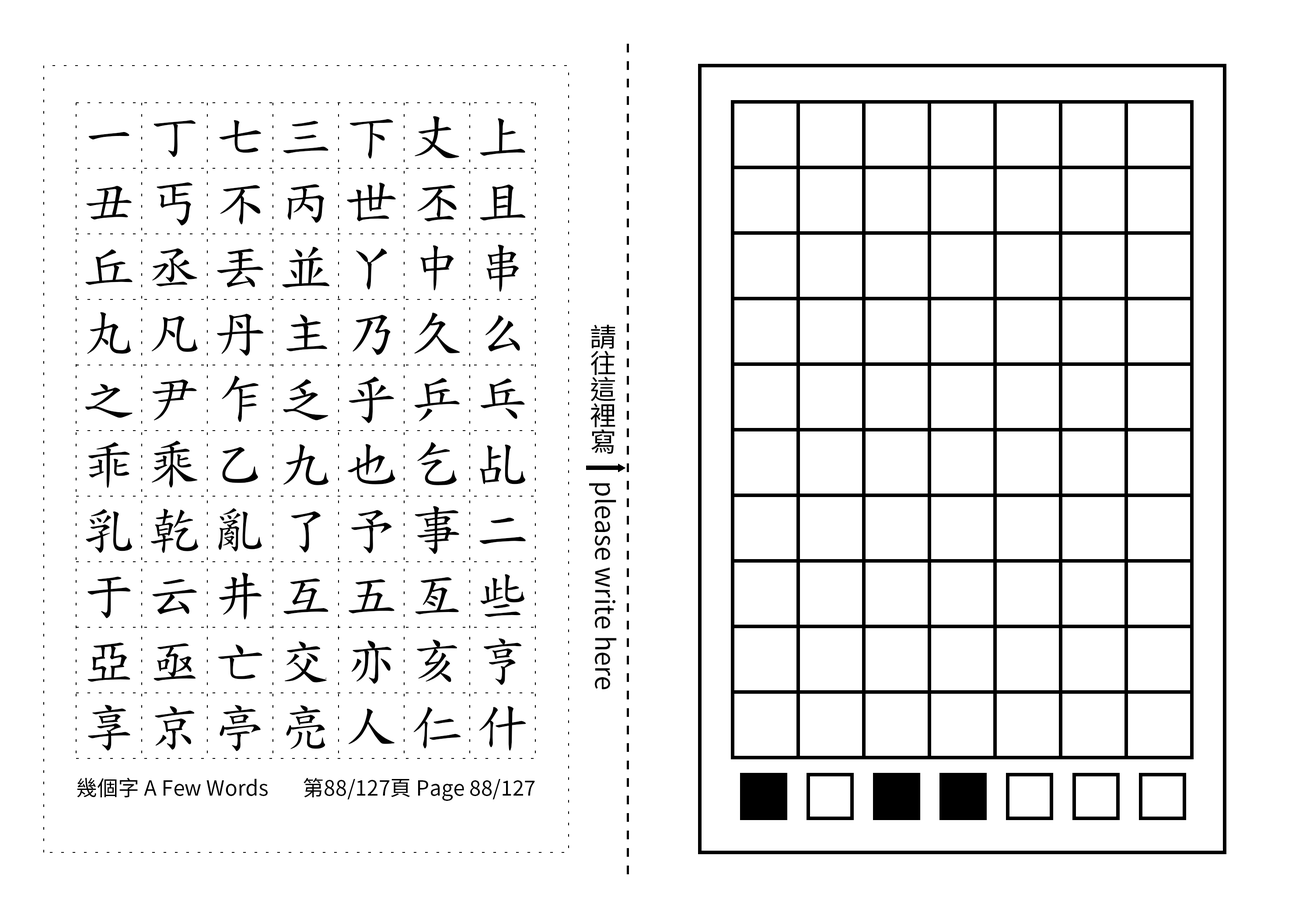
<style>
.page{position:relative;width:1299px;height:918px;background:#ffffff}
.page>*{position:absolute;margin:0}
.t1{font:52.5px/65.6px "TW-Kai-98_1";letter-spacing:0.25em;color:#000000}
.t2{font:26.2px "SourceHanSansTC-Regular";color:#000000}
.t3{font:21px "SourceHanSansTC-Regular";color:#000000}
</style>
<div class="page">
<p class="t1" style="left:85px;top:116px;width:441px;height:636px;text-align:center">一丁七三下丈上丑丐不丙世丕且丘丞丟並丫中串丸凡丹主乃久么之尹乍乏乎乒乓乖乘乙九也乞乩乳乾亂了予事二于云井互五亙些亞亟亡交亦亥亨享京亭亮人仁什</p>
<p class="t2" style="left:589px;top:324px;width:28px;height:366px;text-align:center">請往這裡寫　please write here</p>
<p class="t3" style="left:77px;top:778px;width:191px;height:20px">幾個字 A Few Words</p>
<p class="t3" style="left:303px;top:778px;width:232px;height:23px">第88/127頁 Page 88/127</p>
</div>
